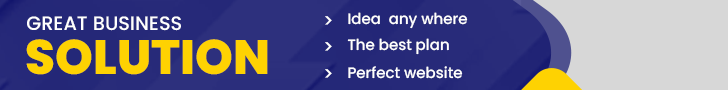
<style>
.page{position:relative;width:728px;height:90px;background:#d7d7d7}
.page>*{position:absolute;margin:0}
.t1{font:19.4px "Poppins-Medium";color:#ffffff}
.t2{font:18.1px "Poppins-Medium";color:#ffffff}
.t3{font:15.1px "Poppins-Medium";color:#ffffff}
.t4{font:48.4px "Poppins-ExtraBold";color:#fed202}
</style>
<div class="page">
<p class="t1" style="left:27px;top:16px;width:154px;height:15px">GREAT BUSINESS</p>
<p class="t2" style="left:325px;top:16px;width:7px;height:9px">&gt;</p>
<p class="t3" style="left:348px;top:12px;width:120px;height:17px">Idea  any where</p>
<p class="t4" style="left:26px;top:39px;width:242px;height:36px">SOLUTION</p>
<p class="t3" style="left:347px;top:38px;width:102px;height:17px">The best plan</p>
<p class="t2" style="left:325px;top:42px;width:7px;height:9px">&gt;</p>
<p class="t2" style="left:325px;top:69px;width:7px;height:9px">&gt;</p>
<p class="t3" style="left:348px;top:66px;width:115px;height:13px">Perfect website</p>
</div>
